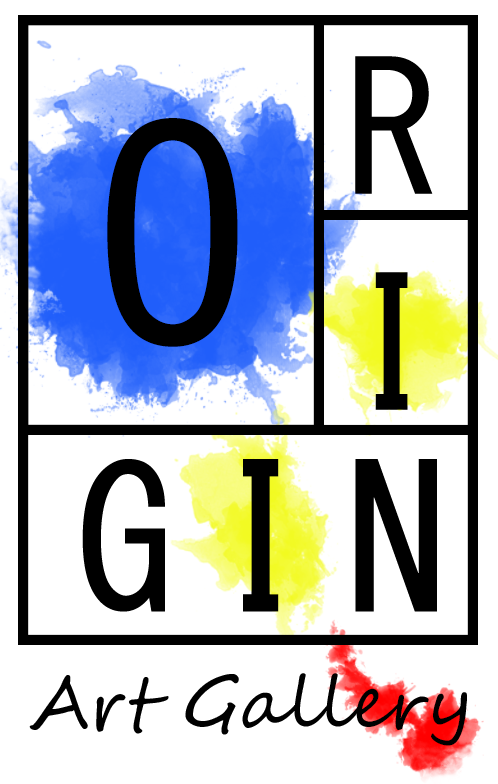
<style>
.page{position:relative;width:498px;height:784px;background:#ffffff}
.page>*{position:absolute;margin:0}
.t1{font:180px "MS-Gothic";color:#000000}
.t2{font:300px "MS-Gothic";color:#000000}
.t3{font:200px "MS-Gothic";color:#000000}
.t4{font:72px "SegoeScript";color:#000000}
</style>
<div class="page">
<p class="t1" style="left:355px;top:56px;width:78px;height:354px;text-align:right">R<br>I</p>
<p class="t2" style="left:107px;top:118px;width:131px;height:229px">O</p>
<p class="t3" style="left:82px;top:459px;width:355px;height:153px">G I N</p>
<p class="t4" style="left:29px;top:673px;width:438px;height:73px">Art Gallery</p>
</div>
